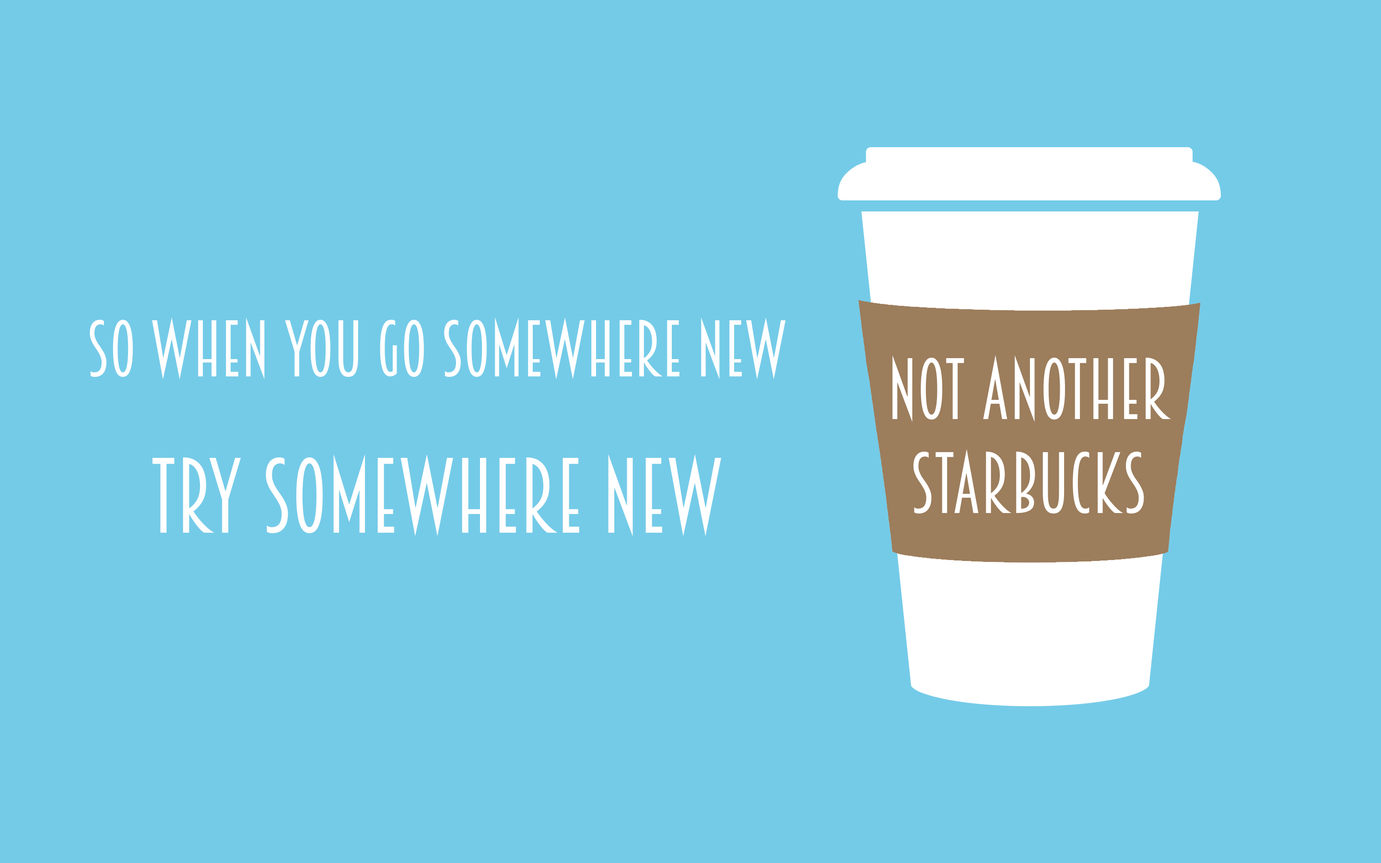
<style>
.page{position:relative;width:1381px;height:863px;background:#74cbe8}
.page>*{position:absolute;margin:0}
.t1{font:71.9px "Breamcatcher-Regular";color:#ffffff}
.t2{font:95.9px "Breamcatcher-Regular";color:#ffffff}
</style>
<div class="page">
<p class="t1" style="left:90px;top:317px;width:696px;height:220px;text-align:center">so when you go somewhere new<br> <br><span class="t2">try somewhere new</span></p>
</div>
